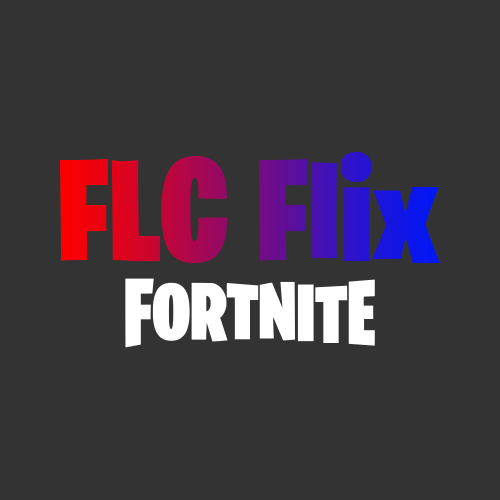
<style>
.page{position:relative;width:500px;height:500px;background:#333333}
.page>*{position:absolute;margin:0}
.t1{font:145.8px "BurbankBigCondensed-Black"}
</style>
<div class="page">
<p class="t1" style="left:59px;top:152px;width:381px;height:111px">FLC Flix</p>
</div>
